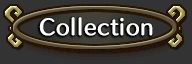
<style>
.page{position:relative;width:192px;height:64px;background:#333333}
.page>*{position:absolute;margin:0}
.t1{font:20px "FOTHummingStd-B";letter-spacing:0.025em;color:#ffffff}
</style>
<div class="page">
<p class="t1" style="left:39px;top:17px;width:114px;height:19px">Collection</p>
</div>
